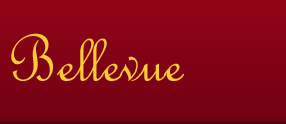
<style>
.page{position:relative;width:286px;height:124px}
.page>*{position:absolute;margin:0}
.t1{font:71.7px "FrenchScriptMT";color:#ffcc33}
</style>
<div class="page">
<p class="t1" style="left:11px;top:33px;width:174px;height:48px">Bellevue</p>
</div>
